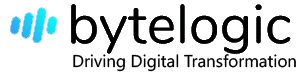
<style>
.page{position:relative;width:304px;height:81px;background:#ffffff}
.page>*{position:absolute;margin:0}
.t1{font:17px "NirmalaUI";color:#000000}
</style>
<div class="page">
<p class="t1" style="left:73px;top:54px;width:223px;height:18px">Driving Digital Transformation</p>
</div>
